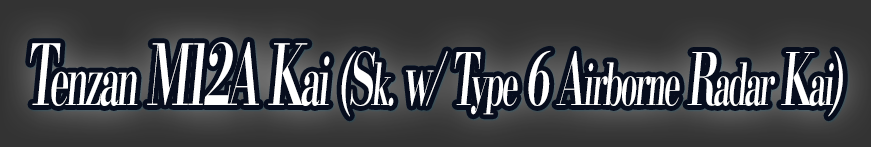
<style>
.page{position:relative;width:871px;height:147px}
.page>*{position:absolute;margin:0}
.t1{font:57.6px "KochoStd-Heavy";letter-spacing:-0.08em;color:#ffffff;font-style:italic;scale:0.53 1}
.t2{font:84px "KochoStd-Heavy";letter-spacing:-0.08em;color:#ffffff;font-style:italic;scale:0.53 1}
.t3{font:67.2px "KochoStd-Heavy";letter-spacing:-0.08em;color:#ffffff;font-style:italic;scale:0.53 1}
.t4{font:72px "KochoStd-Heavy";letter-spacing:-0.08em;color:#ffffff;font-style:italic;scale:0.53 1}
</style>
<div class="page">
<p class="t1" style="left:30px;top:42px;width:813px;height:75px"><span class="t2">T</span><span class="t3">enzan</span><span class="t2"> M12A K</span><span class="t3">ai </span><span class="t4">(S</span>k.<span class="t4"> w/ T</span>ype<span class="t4"> 6 A</span>irborne<span class="t4"> R</span>adar<span class="t4"> K</span>ai<span class="t4">)</span></p>
</div>
